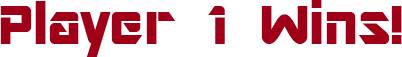
<style>
.page{position:relative;width:402px;height:57px;background:#ffffff}
.page>*{position:absolute;margin:0}
.t1{font:60px "ARDESTINE";color:#9f0017}
</style>
<div class="page">
<p class="t1" style="left:0px;top:0px;width:402px;height:57px">Player 1 Wins!</p>
</div>
